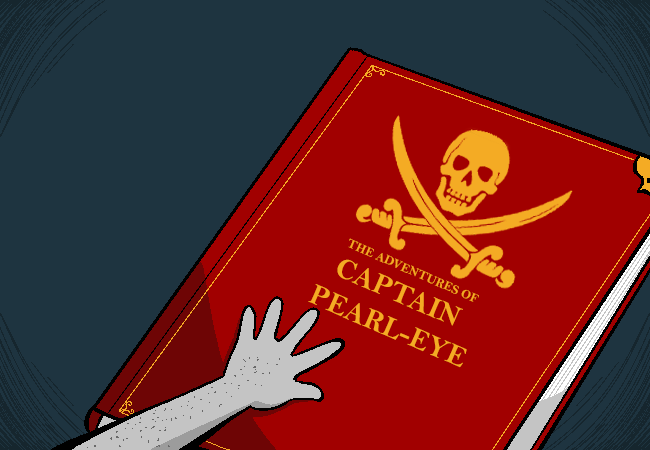
<style>
.page{position:relative;width:650px;height:450px;background:#1e3440}
.page>*{position:absolute;margin:0}
.t1{font:12.8px "BellMTBold";color:#f4ab24}
.t2{font:29.3px "BellMTBold";color:#f4ab24}
</style>
<div class="page">
<p class="t1" style="left:348px;top:238px;width:131px;height:64px;rotate:23deg">THE ADVENTURES OF</p>
<p class="t2" style="left:308px;top:259px;width:159px;height:109px;text-align:center;rotate:23deg">CAPTAIN <br>PEARL-EYE</p>
</div>
